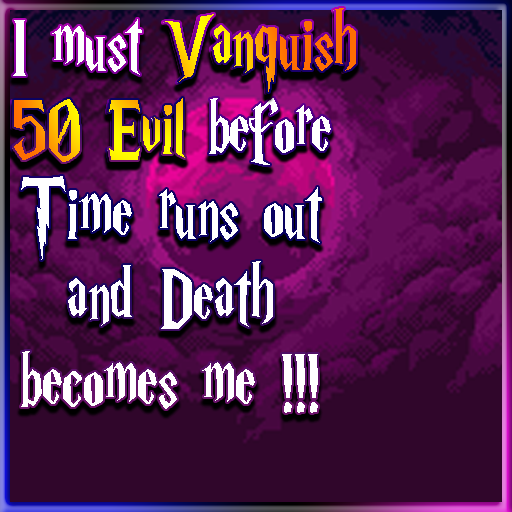
<style>
.page{position:relative;width:512px;height:512px;background:#30062b}
.page>*{position:absolute;margin:0}
.t1{font:85.5px/84.3px "HarryP";color:#ffffff;scale:0.86 1}
.t2{font:85.5px/84.3px "HarryP";scale:0.86 1}
</style>
<div class="page">
<p class="t1" style="left:12px;top:9px;width:342px;height:404px;text-align:center">I must Vanquish<br>50 Evil before <br>Time runs out <br>and Death <br>becomes me !!!</p>
<p class="t2" style="left:14px;top:8px;width:342px;height:154px;text-align:center">Vanquish<br>50 Evil</p>
</div>
